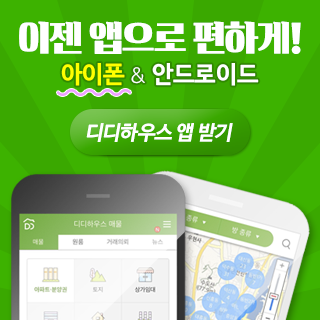
<style>
.page{position:relative;width:320px;height:320px;background:#3db200}
.page>*{position:absolute;margin:0}
.t1{font:34px "YoonMeolijeongche2SC";letter-spacing:-0.025em;color:#ffffff}
.t2{font:24px "NanumBarunGothicOTFBold";color:#ffffff}
.t3{font:24px "NanumBarunGothicOTFBold";color:#ffff00}
.t4{font:20px "NanumBarunGothicOTFLight";color:#ffffff}
.t5{font:20px "NanumBarunGothicOTFBold";letter-spacing:-0.025em;color:#ffffff;font-style:italic}
</style>
<div class="page">
<p class="t1" style="left:19px;top:21px;width:282px;height:33px">이젠 앱으로 편하게!</p>
<p class="t2" style="left:61px;top:63px;width:198px;height:23px"><span class="t3">아이폰 </span><span class="t4">&amp; </span>안드로이드</p>
<p class="t5" style="left:86px;top:123px;width:147px;height:19px">디디하우스 앱 받기</p>
</div>
